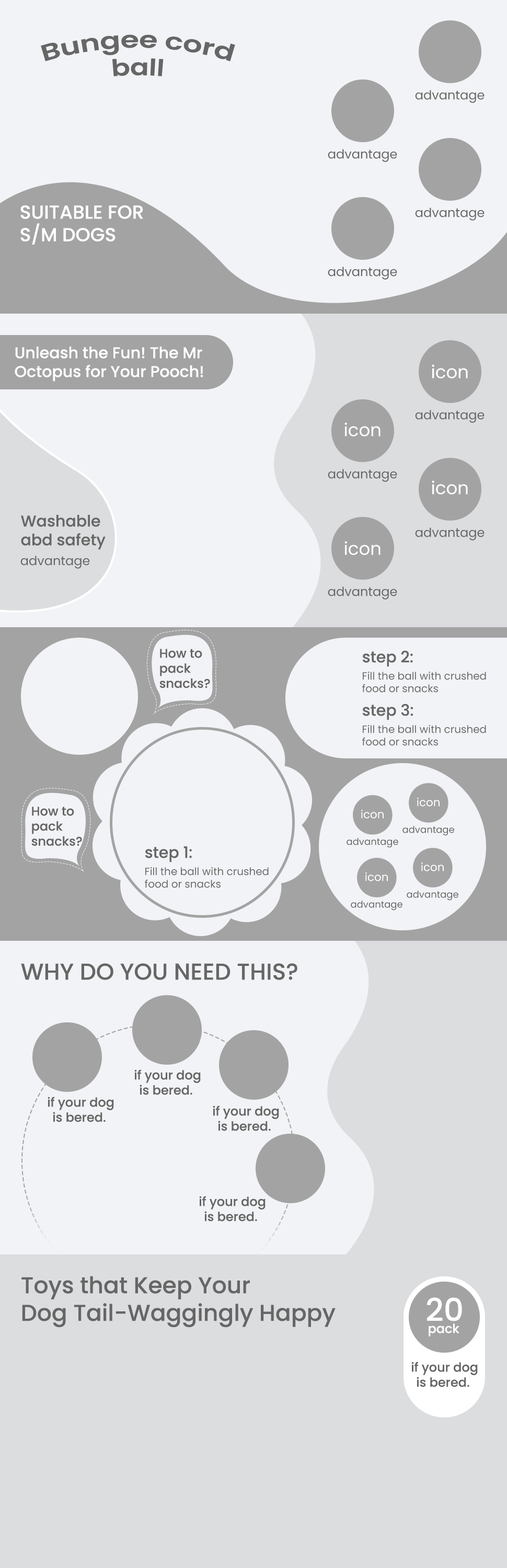
<style>
.page{position:relative;width:507px;height:1568px;background:#f2f3f6}
.page>*{position:absolute;margin:0}
.t1{font:23px "Poppins-SemiBold";color:#666666}
.t2{font:12.5px "Poppins-Regular";color:#666666}
.t3{font:18.8px "Poppins-Medium";color:#ffffff}
.t4{font:15.7px "Poppins-Medium";color:#ffffff}
.t5{font:17.8px "Poppins-Regular";color:#ffffff}
.t6{font:15.7px "Poppins-Medium";color:#666666}
.t7{font:12.5px "Poppins-Medium";color:#666666}
.t8{font:10.5px "Poppins-Regular";color:#666666}
.t9{font:11.2px "Poppins-Regular";color:#ffffff}
.t10{font:9.4px "Poppins-Regular";color:#666666}
.t11{font:23px "Poppins-Medium";color:#666666}
.t12{font:31.4px "Poppins-Medium";color:#ffffff}
.t13{font:12.5px "Poppins-Medium";color:#ffffff}
</style>
<div class="page">
<p class="t1" style="left:41px;top:34px;width:194px;height:42px;text-align:center">Bungee cord<br>ball</p>
<p class="t2" style="left:415px;top:90px;width:70px;height:13px">advantage</p>
<p class="t2" style="left:328px;top:149px;width:69px;height:13px">advantage</p>
<p class="t3" style="left:20px;top:205px;width:123px;height:40px">SUITABLE FOR<br>S/M DOGS</p>
<p class="t2" style="left:415px;top:207px;width:70px;height:14px">advantage</p>
<p class="t2" style="left:328px;top:267px;width:69px;height:13px">advantage</p>
<p class="t4" style="left:15px;top:347px;width:188px;height:35px">Unleash the Fun! The Mr<br>Octopus for Your Pooch!</p>
<p class="t5" style="left:432px;top:364px;width:36px;height:14px">icon</p>
<p class="t2" style="left:415px;top:410px;width:70px;height:13px">advantage</p>
<p class="t5" style="left:344px;top:422px;width:37px;height:14px">icon</p>
<p class="t2" style="left:328px;top:469px;width:69px;height:13px">advantage</p>
<p class="t5" style="left:432px;top:480px;width:36px;height:14px">icon</p>
<p class="t6" style="left:21px;top:515px;width:85px;height:35px">Washable<br>abd safety</p>
<p class="t2" style="left:415px;top:527px;width:70px;height:13px">advantage</p>
<p class="t5" style="left:344px;top:541px;width:37px;height:14px">icon</p>
<p class="t2" style="left:20px;top:556px;width:70px;height:13px">advantage</p>
<p class="t2" style="left:328px;top:586px;width:69px;height:13px">advantage</p>
<p class="t7" style="left:159px;top:649px;width:51px;height:39px">How to <br>pack<br>snacks?</p>
<p class="t6" style="left:362px;top:651px;width:51px;height:16px">step 2:</p>
<p class="t8" style="left:362px;top:672px;width:124px;height:21px">Fill the ball with crushed <br>food or snacks</p>
<p class="t6" style="left:362px;top:704px;width:51px;height:16px">step 3:</p>
<p class="t8" style="left:362px;top:725px;width:124px;height:21px">Fill the ball with crushed <br>food or snacks</p>
<p class="t9" style="left:417px;top:798px;width:23px;height:8px">icon</p>
<p class="t7" style="left:31px;top:806px;width:51px;height:40px">How to <br>pack<br>snacks?</p>
<p class="t9" style="left:361px;top:810px;width:23px;height:8px">icon</p>
<p class="t10" style="left:402px;top:826px;width:52px;height:10px">advantage</p>
<p class="t10" style="left:347px;top:838px;width:51px;height:10px">advantage</p>
<p class="t6" style="left:145px;top:846px;width:47px;height:16px">step 1:</p>
<p class="t8" style="left:145px;top:867px;width:124px;height:21px">Fill the ball with crushed <br>food or snacks</p>
<p class="t9" style="left:421px;top:862px;width:23px;height:9px">icon</p>
<p class="t9" style="left:365px;top:872px;width:23px;height:9px">icon</p>
<p class="t10" style="left:407px;top:891px;width:51px;height:10px">advantage</p>
<p class="t10" style="left:351px;top:901px;width:51px;height:9px">advantage</p>
<p class="t11" style="left:21px;top:963px;width:276px;height:17px">WHY DO YOU NEED THIS?</p>
<p class="t7" style="left:134px;top:1069px;width:67px;height:26px;text-align:center">if your dog<br>is bered.</p>
<p class="t7" style="left:48px;top:1097px;width:66px;height:25px;text-align:center">if your dog<br>is bered.</p>
<p class="t7" style="left:213px;top:1105px;width:66px;height:26px;text-align:center">if your dog<br>is bered.</p>
<p class="t7" style="left:199px;top:1196px;width:67px;height:25px;text-align:center">if your dog<br>is bered.</p>
<p class="t11" style="left:21px;top:1276px;width:315px;height:52px">Toys that Keep Your<br>Dog Tail-Waggingly Happy</p>
<p class="t12" style="left:427px;top:1297px;width:35px;height:24px">20</p>
<p class="t13" style="left:429px;top:1323px;width:30px;height:13px">pack</p>
<p class="t7" style="left:411px;top:1362px;width:67px;height:25px;text-align:center">if your dog<br>is bered.</p>
</div>
